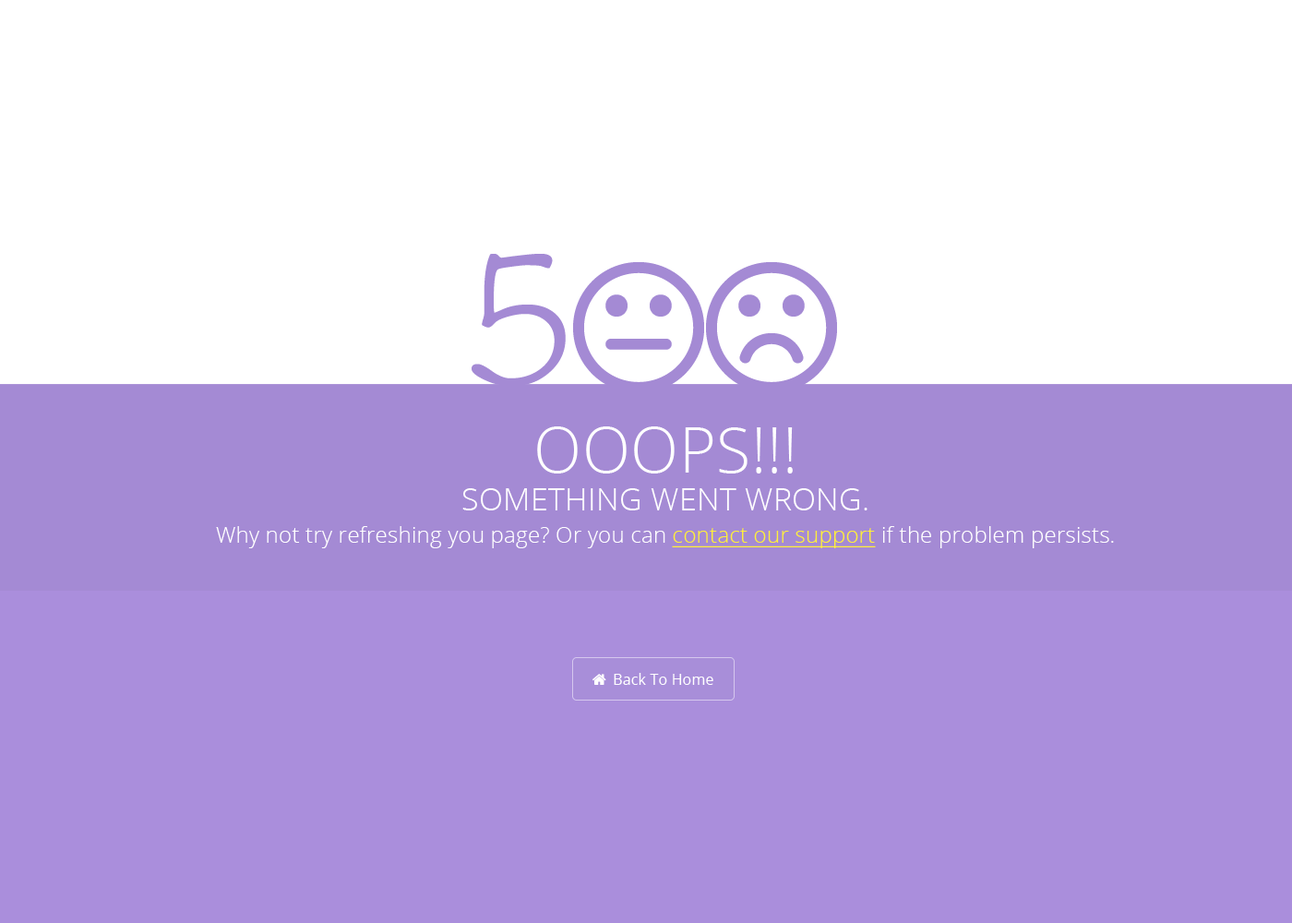
<style>
.page{position:relative;width:1292px;height:923px;background:#ffffff}
.page>*{position:absolute;margin:0}
.t1{font:22.1px/32.3px "OpenSans-Light";letter-spacing:0.01em;color:#ffffff}
.t2{font:62.8px "OpenSans-Light";letter-spacing:0.01em;color:#ffffff;text-transform:uppercase}
.t3{font:31.4px "OpenSans-Light";letter-spacing:0.01em;color:#ffffff;text-transform:uppercase}
.t4{font:22.1px/32.3px "OpenSans-Light";letter-spacing:0.01em;color:#ffef3b;text-decoration:underline}
</style>
<div class="page">
<p class="t1" style="left:216px;top:426px;width:898px;height:122px;text-align:center"><span class="t2">OOOPS!!!<br></span><span class="t3">Something went wrong.<br></span>Why not try refreshing you page? Or you can <span class="t4">contact our support</span> if the problem persists.</p>
</div>
